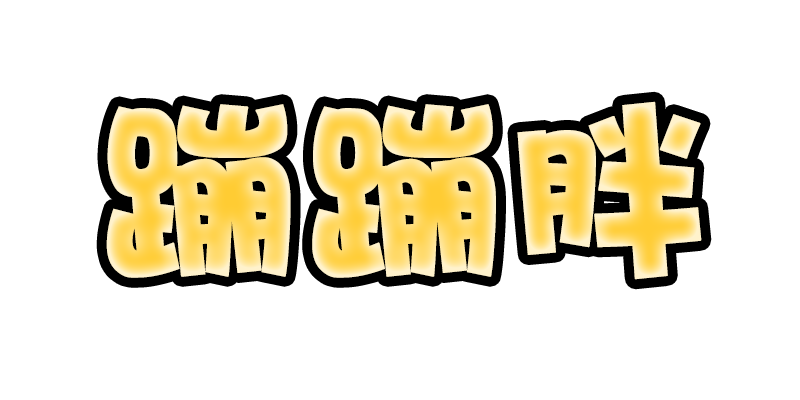
<style>
.page{position:relative;width:800px;height:400px;background:#ffffff}
.page>*{position:absolute;margin:0}
.t1{font:200px "DFHaiBaoW12";font-weight:bold}
</style>
<div class="page">
<p class="t1" style="left:106px;top:101px;width:596px;height:179px">蹦蹦胖</p>
</div>
